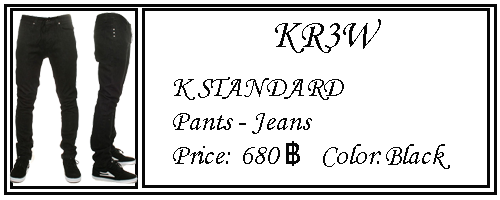
<style>
.page{position:relative;width:500px;height:200px;background:#ffffff}
.page>*{position:absolute;margin:0}
.t1{font:40.9px "MonotypeCorsiva";color:#070707}
.t2{font:28.6px "MonotypeCorsiva";color:#070707}
.t3{font:28.6px "Tahoma";color:#070707}
</style>
<div class="page">
<p class="t1" style="left:275px;top:19px;width:106px;height:34px">KR3W</p>
<p class="t2" style="left:173px;top:77px;width:277px;height:92px">K STANDARD<br>Pants - Jeans<br>Price: 680 <span class="t3">฿</span>   Color:Black</p>
</div>
